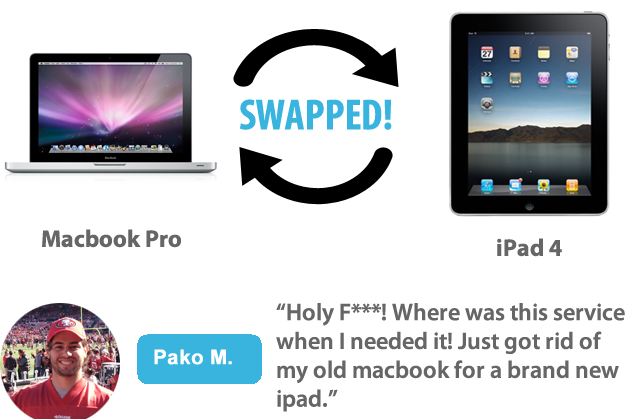
<style>
.page{position:relative;width:635px;height:419px;background:#ffffff}
.page>*{position:absolute;margin:0}
.t1{font:43.6px "MyriadPro-BoldCond";color:#38b4de}
.t2{font:24px "MyriadPro-Bold";color:#666666}
.t3{font:24px "MyriadPro-Semibold";color:#666666}
.t4{font:20px "Arial-BoldMT";color:#ffffff;font-weight:bold}
</style>
<div class="page">
<p class="t1" style="left:240px;top:99px;width:152px;height:31px">SWAPPED!</p>
<p class="t2" style="left:42px;top:229px;width:139px;height:19px">Macbook Pro</p>
<p class="t2" style="left:497px;top:238px;width:65px;height:19px">iPad 4</p>
<p class="t3" style="left:276px;top:303px;width:349px;height:109px">“Holy F***! Where was this service when I needed it! Just got rid of my old macbook for a brand new ipad.”</p>
<p class="t4" style="left:154px;top:349px;width:78px;height:16px">Pako M.</p>
</div>
